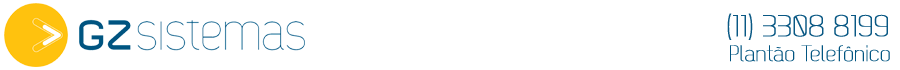
<style>
.page{position:relative;width:900px;height:70px;background:#ffffff}
.page>*{position:absolute;margin:0}
.t1{font:30px "Dekar-Light";color:#095884;font-weight:bold}
.t2{font:22.4px "Dekar-Light";color:#025581;font-weight:bold}
</style>
<div class="page">
<p class="t1" style="left:727px;top:13px;width:161px;height:27px">(11) 3308 8199</p>
<p class="t2" style="left:730px;top:45px;width:160px;height:17px">Plantão Telefônico</p>
</div>
